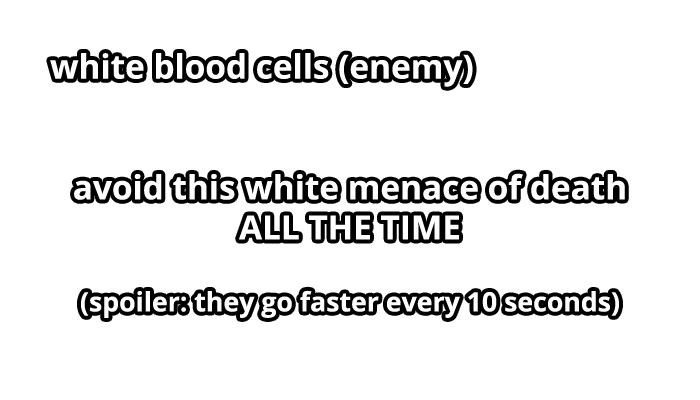
<style>
.page{position:relative;width:700px;height:400px;background:#ffffff}
.page>*{position:absolute;margin:0}
.t1{font:33.3px "OpenSans-Bold";color:#ffffff}
.t2{font:26.7px "OpenSans-Bold";color:#ffffff}
</style>
<div class="page">
<p class="t1" style="left:50px;top:53px;width:423px;height:34px">white blood cells (enemy)</p>
<p class="t1" style="left:74px;top:173px;width:551px;height:145px;text-align:center">avoid this white menace of death<br>ALL THE TIME<br><br><span class="t2">(spoiler: they go faster every 10 seconds)</span></p>
</div>
